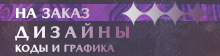
<style>
.page{position:relative;width:220px;height:56px}
.page>*{position:absolute;margin:0}
.t1{font:14px "ArticaPro-Black"}
.t2{font:10px/14px "ArticaPro-Black"}
.t3{font:16px/14px "ArticaPro-Black";letter-spacing:0.26em}
</style>
<div class="page">
<p class="t1" style="left:15px;top:8px;width:75px;height:11px">НА ЗАКАЗ</p>
<p class="t2" style="left:15px;top:22px;width:115px;height:32px"><span class="t3">ДИЗАЙНЫ<br></span>КОДЫ И ГРАФИКА</p>
</div>
